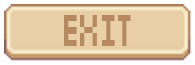
<style>
.page{position:relative;width:195px;height:65px;background:#e8cfa6}
.page>*{position:absolute;margin:0}
.t1{font:50px "04b03";color:#b68962;scale:0.67 1}
</style>
<div class="page">
<p class="t1" style="left:64px;top:15px;width:67px;height:31px">EXIT</p>
</div>
